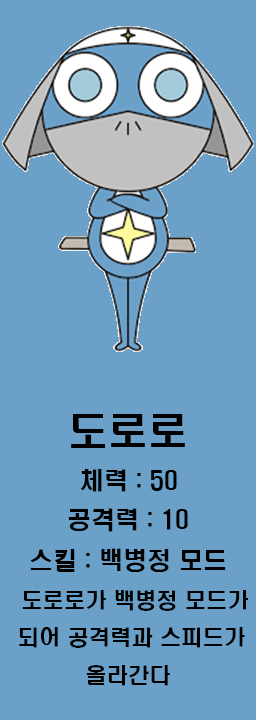
<style>
.page{position:relative;width:256px;height:720px;background:#6ba0c8}
.page>*{position:absolute;margin:0}
.t1{font:40px "H2hdrM";color:#000000}
.t2{font:24px "H2hdrM";color:#000000}
.t3{font:21.3px "H2hdrM";color:#000000}
</style>
<div class="page">
<p class="t1" style="left:71px;top:414px;width:114px;height:34px">도로로</p>
<p class="t2" style="left:80px;top:469px;width:97px;height:23px">체력 : 50</p>
<p class="t2" style="left:68px;top:508px;width:120px;height:24px">공격력 : 10</p>
<p class="t2" style="left:30px;top:548px;width:196px;height:24px">스킬 : 백병정 모드</p>
<p class="t3" style="left:19px;top:590px;width:230px;height:96px;text-align:center">도로로가 백병정 모드가<br>되어 공격력과 스피드가 <br>올라간다</p>
</div>
